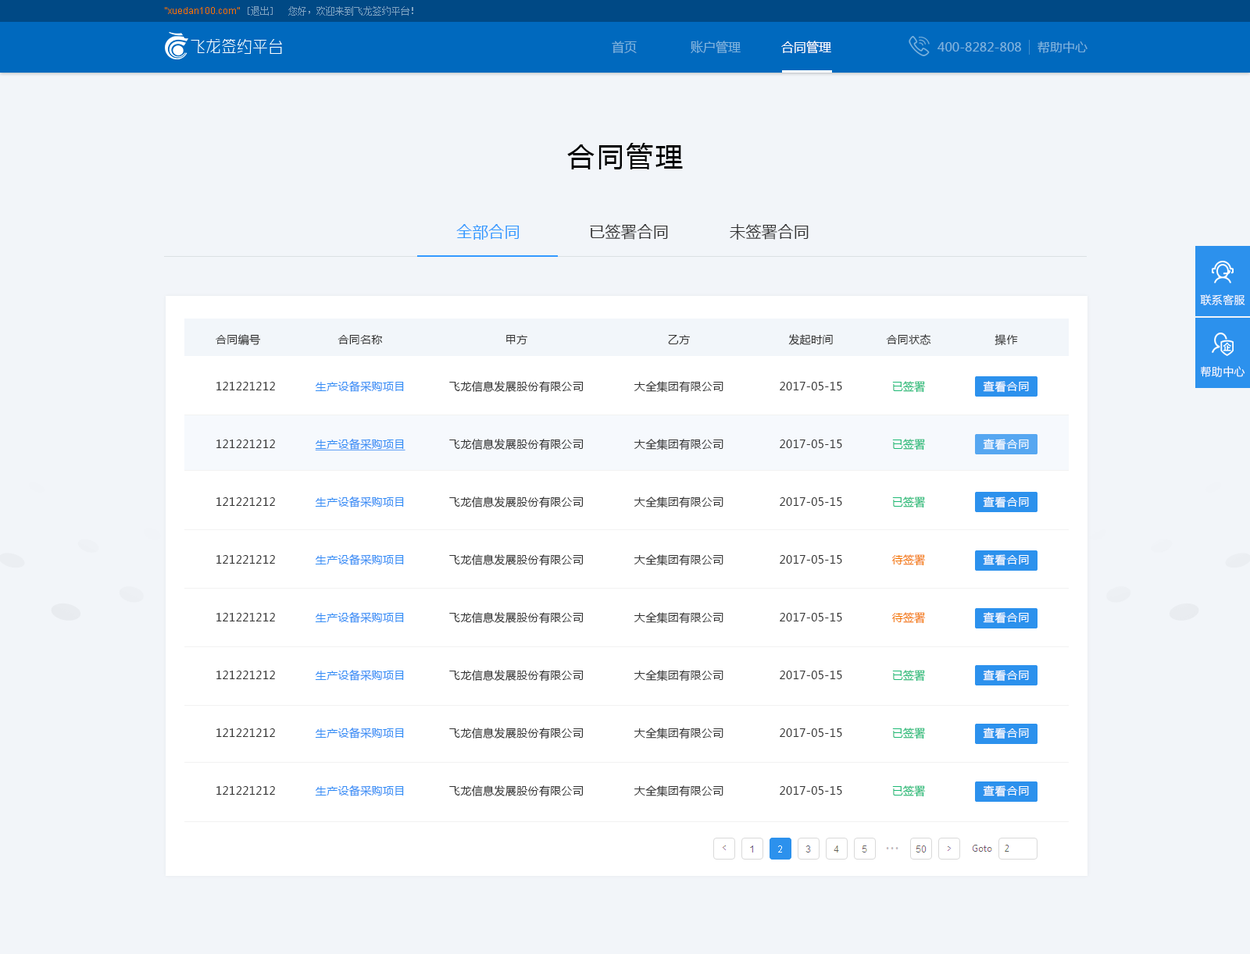
<style>
.page{position:relative;width:1250px;height:954px;background:#f2f5f9}
.page>*{position:absolute;margin:0}
.t1{font:9.4px "ArialMT";color:#ff7300}
.t2{font:9.4px "SimSun";color:#7fa4c2}
.t3{font:17.2px "ZHSRXT--GBK1-0";color:#ffffff;scale:0.91 1}
.t4{font:12.5px "MicrosoftYaHei";color:#7fb4de}
.t5{font:12.5px "MicrosoftYaHei";color:#ffffff}
.t6{font:27.3px "MicrosoftYaHei";letter-spacing:0.075em;color:#000000}
.t7{font:15.6px "MicrosoftYaHei";letter-spacing:0.025em;color:#3399ff}
.t8{font:15.6px "MicrosoftYaHei";letter-spacing:0.025em;color:#333333}
.t9{font:10.9px "MicrosoftYaHei";letter-spacing:0.025em;color:#ffffff}
.t10{font:10.9px/57.8px "MicrosoftYaHei";letter-spacing:0.025em;color:#333333}
.t11{font:10.9px/46.9px "MicrosoftYaHei";letter-spacing:0.025em;color:#333333}
.t12{font:10.9px/57.8px "MicrosoftYaHei";letter-spacing:0.025em;color:#318cf5}
.t13{font:10.9px/57.8px "MicrosoftYaHei";letter-spacing:0.025em;color:#318cf5;text-decoration:underline}
.t14{font:10.9px/57.8px "MicrosoftYaHei";letter-spacing:0.025em;color:#1bb974}
.t15{font:10.9px/57.8px "MicrosoftYaHei";letter-spacing:0.025em;color:#f37801}
.t16{font:9.4px "ArialMT";color:#ffffff}
</style>
<div class="page">
<p class="t1" style="left:165px;top:7px;width:75px;height:7px">“xuedan100.com”</p>
<p class="t2" style="left:248px;top:6px;width:25px;height:10px">[退出]</p>
<p class="t2" style="left:288px;top:6px;width:125px;height:10px">您好，欢迎来到飞龙签约平台！</p>
<p class="t3" style="left:191px;top:39px;width:91px;height:15px">飞龙签约平台</p>
<p class="t4" style="left:611px;top:41px;width:25px;height:13px">首页</p>
<p class="t4" style="left:690px;top:41px;width:50px;height:13px">账户管理</p>
<p class="t5" style="left:781px;top:41px;width:50px;height:13px">合同管理</p>
<p class="t4" style="left:1037px;top:41px;width:50px;height:12px">帮助中心</p>
<p class="t4" style="left:937px;top:42px;width:84px;height:10px">400-8282-808</p>
<p class="t6" style="left:567px;top:143px;width:116px;height:26px">合同管理</p>
<p class="t7" style="left:456px;top:224px;width:63px;height:16px">全部合同</p>
<p class="t8" style="left:590px;top:224px;width:78px;height:16px">已签署合同</p>
<p class="t8" style="left:729px;top:224px;width:79px;height:16px">未签署合同</p>
<p class="t9" style="left:1200px;top:294px;width:45px;height:11px">联系客服</p>
<p class="t10" style="left:216px;top:334px;width:59px;height:461px"><span class="t11">合同编号<br></span>121221212<br>121221212<br>121221212<br>121221212<br>121221212<br>121221212<br>121221212<br>121221212</p>
<p class="t12" style="left:315px;top:335px;width:90px;height:462px;text-align:center"><span class="t11">合同名称<br></span>生产设备采购项目<br><span class="t13">生产设备采购项目<br></span>生产设备采购项目<br>生产设备采购项目<br>生产设备采购项目<br>生产设备采购项目<br>生产设备采购项目<br>生产设备采购项目</p>
<p class="t10" style="left:449px;top:335px;width:134px;height:462px;text-align:center"><span class="t11">甲方<br></span>飞龙信息发展股份有限公司<br>飞龙信息发展股份有限公司<br>飞龙信息发展股份有限公司<br>飞龙信息发展股份有限公司<br>飞龙信息发展股份有限公司<br>飞龙信息发展股份有限公司<br>飞龙信息发展股份有限公司<br>飞龙信息发展股份有限公司</p>
<p class="t10" style="left:633px;top:335px;width:90px;height:462px;text-align:center"><span class="t11">乙方<br></span>大全集团有限公司<br>大全集团有限公司<br>大全集团有限公司<br>大全集团有限公司<br>大全集团有限公司<br>大全集团有限公司<br>大全集团有限公司<br>大全集团有限公司</p>
<p class="t10" style="left:779px;top:334px;width:63px;height:461px;text-align:center"><span class="t11">发起时间<br></span>2017-05-15<br>2017-05-15<br>2017-05-15<br>2017-05-15<br>2017-05-15<br>2017-05-15<br>2017-05-15<br>2017-05-15</p>
<p class="t14" style="left:886px;top:334px;width:45px;height:463px;text-align:center"><span class="t11">合同状态<br></span>已签署<br>已签署<br>已签署<br><span class="t15">待签署<br>待签署<br></span>已签署<br>已签署<br>已签署</p>
<p class="t9" style="left:1200px;top:366px;width:45px;height:11px">帮助中心</p>
<p class="t16" style="left:778px;top:846px;width:4px;height:7px">2</p>
</div>
